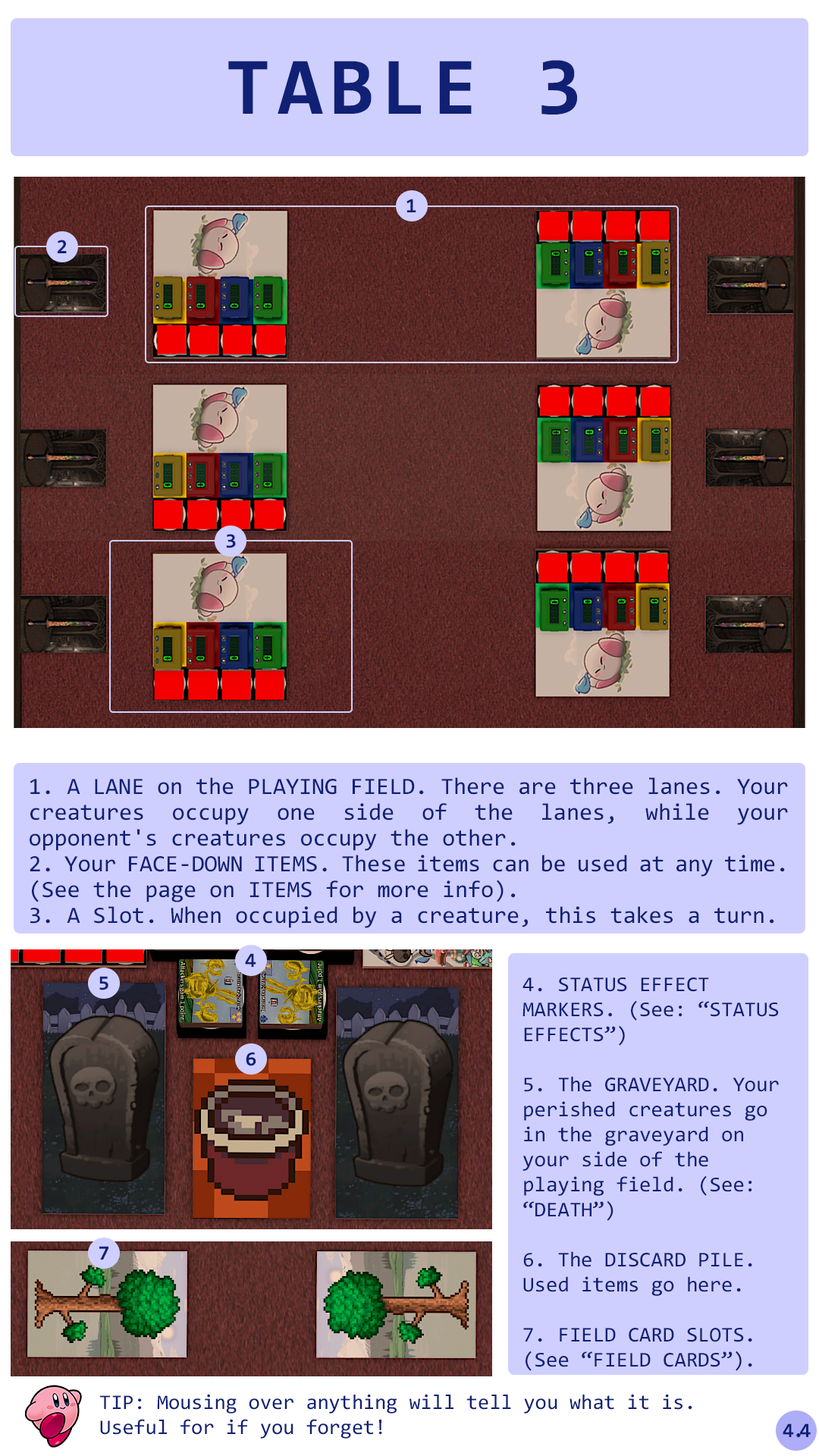
<style>
.page{position:relative;width:819px;height:1456px;background:#cfcfff}
.page>*{position:absolute;margin:0}
.t1{font:82.2px "Consolas-Bold";letter-spacing:0.08em;color:#102175}
.t2{font:20.5px "Consolas-Bold";color:#102175}
.t3{font:23.5px/25.8px "Consolas";color:#102175}
.t4{font:21.2px/25px "Consolas";color:#102175}
.t5{font:20.9px "Consolas";color:#102175}
.t6{font:20.5px "Consolas-Bold";letter-spacing:-0.06em;color:#102175}
.t7{font:20.5px "Consolas-Bold";letter-spacing:-0.22em;color:#102175}
</style>
<div class="page">
<p class="t1" style="left:228px;top:60px;width:349px;height:55px">TABLE 3</p>
<p class="t2" style="left:406px;top:199px;width:10px;height:13px">1</p>
<p class="t2" style="left:57px;top:240px;width:10px;height:13px">2</p>
<p class="t2" style="left:226px;top:534px;width:10px;height:14px">3</p>
<p class="t3" style="left:30px;top:777px;width:758px;height:151px;text-align:justify">1. A LANE on the PLAYING FIELD. There are three lanes. Your creatures occupy one side of the lanes, while your opponent's creatures occupy the other.<br>2. Your FACE-DOWN ITEMS. These items can be used at any time. (See the page on ITEMS for more info).<br>3. A Slot. When occupied by a creature, this takes a turn.</p>
<p class="t2" style="left:245px;top:953px;width:11px;height:14px">4</p>
<p class="t2" style="left:99px;top:976px;width:9px;height:14px">5</p>
<p class="t4" style="left:522px;top:977px;width:257px;height:394px">4. STATUS EFFECT MARKERS. (See: “STATUS EFFECTS”)<br><br>5. The GRAVEYARD. Your perished creatures go in the graveyard on your side of the playing field. (See: “DEATH”)<br><br>6. The DISCARD PILE. Used items go here. <br><br>7. FIELD CARD SLOTS. (See “FIELD CARDS”).</p>
<p class="t2" style="left:246px;top:1052px;width:10px;height:14px">6</p>
<p class="t2" style="left:99px;top:1246px;width:9px;height:14px">7</p>
<p class="t5" style="left:100px;top:1394px;width:592px;height:45px">TIP: Mousing over anything will tell you what it is.<br>Useful for if you forget!</p>
<p class="t6" style="left:783px;top:1423px;width:28px;height:15px">4<span class="t7">.</span>4</p>
</div>
